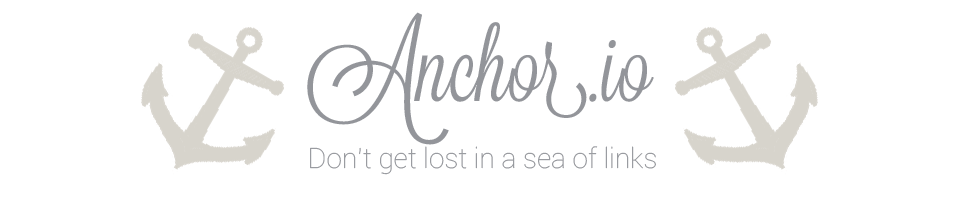
<style>
.page{position:relative;width:960px;height:200px;background:#ffffff}
.page>*{position:absolute;margin:0}
.t1{font:100px "Lavanderia-Regular";color:#93959a}
.t2{font:28px "Roboto-Thin";color:#93959a}
</style>
<div class="page">
<p class="t1" style="left:307px;top:12px;width:347px;height:133px">Anchor.io</p>
<p class="t2" style="left:310px;top:146px;width:346px;height:29px">Don’t get lost in a sea of links</p>
</div>
